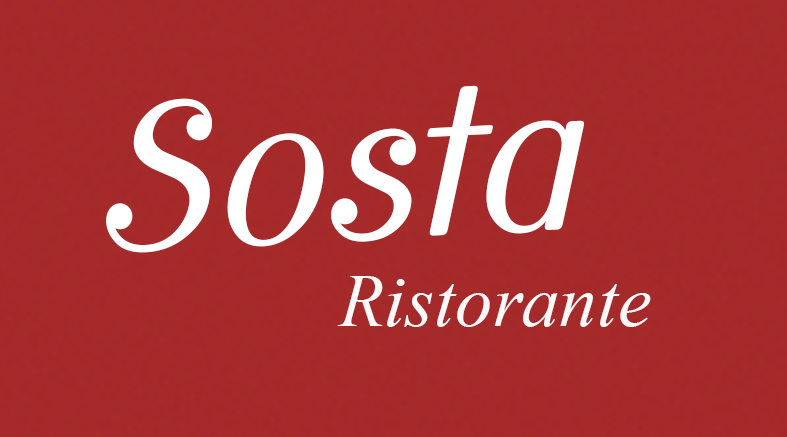
<style>
.page{position:relative;width:787px;height:437px}
.page>*{position:absolute;margin:0}
.t1{font:200px "CursiveSans-Book";color:#ffffff}
.t2{font:75px "TimesNewRomanPS-ItalicMT";color:#fff8f8}
</style>
<div class="page">
<p class="t1" style="left:106px;top:85px;width:478px;height:168px;rotate:-3deg">Sosta</p>
<p class="t2" style="left:337px;top:276px;width:314px;height:51px">Ristorante</p>
</div>
